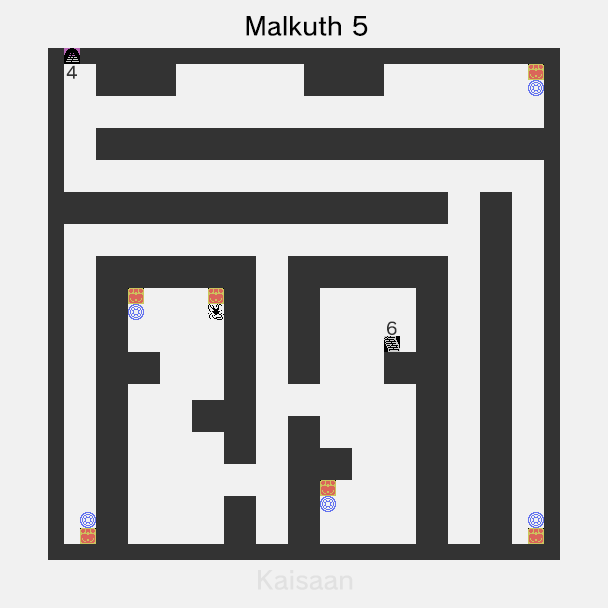
<style>
.page{position:relative;width:608px;height:608px;background:#f1f1f1}
.page>*{position:absolute;margin:0}
.t1{font:25px "nintendoNTLG-DB002";color:#000000}
.t2{font:16.7px "nintendoNTLG-DB002";color:#333333}
.t3{font:25px "nintendoNTLG-DB002";color:#e1e1e1}
</style>
<div class="page">
<p class="t1" style="left:246px;top:16px;width:122px;height:20px">Malkuth 5</p>
<p class="t2" style="left:66px;top:65px;width:11px;height:14px">4</p>
<p class="t2" style="left:387px;top:321px;width:10px;height:14px">6</p>
<p class="t3" style="left:258px;top:570px;width:95px;height:20px">Kaisaan</p>
</div>
